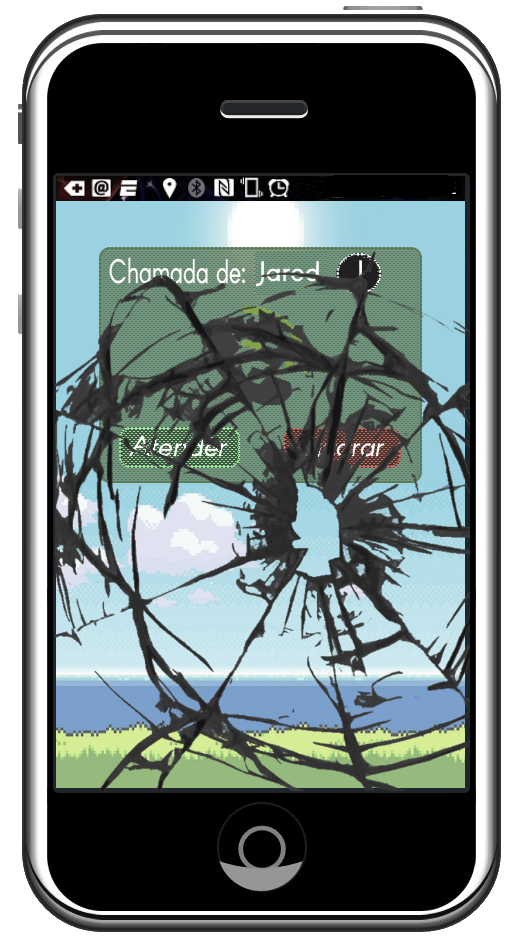
<style>
.page{position:relative;width:515px;height:943px;background:#000000}
.page>*{position:absolute;margin:0}
.t1{font:33.3px "Arcon-Regular";color:#fefefe;scale:0.69 1}
.t2{font:28px "Arcon-Regular";color:#ffffff;font-style:italic}
.t3{font:28px "Arcon-Regular";font-style:italic}
</style>
<div class="page">
<p class="t1" style="left:109px;top:257px;width:136px;height:27px">Chamada de:</p>
<p class="t2" style="left:129px;top:435px;width:99px;height:22px">Atender</p>
<p class="t3" style="left:300px;top:435px;width:85px;height:27px">Ignorar</p>
</div>
